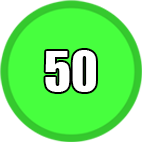
<style>
.page{position:relative;width:142px;height:142px;background:#47ff3e}
.page>*{position:absolute;margin:0}
.t1{font:50px "Impact";color:#ffffff}
</style>
<div class="page">
<p class="t1" style="left:45px;top:50px;width:51px;height:42px">50</p>
</div>
